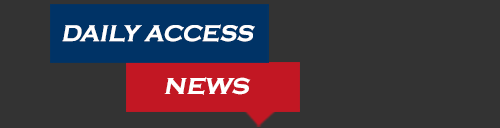
<style>
.page{position:relative;width:500px;height:128px;background:#333333}
.page>*{position:absolute;margin:0}
.t1{font:23.7px "CopperplateGothic-Bold";color:#ffffff;font-style:italic}
.t2{font:29.2px "CopperplateGothic-Bold";color:#ffffff;font-style:italic}
</style>
<div class="page">
<p class="t1" style="left:62px;top:24px;width:193px;height:18px">DAILY ACCESS</p>
<p class="t2" style="left:164px;top:77px;width:87px;height:18px">news</p>
</div>
